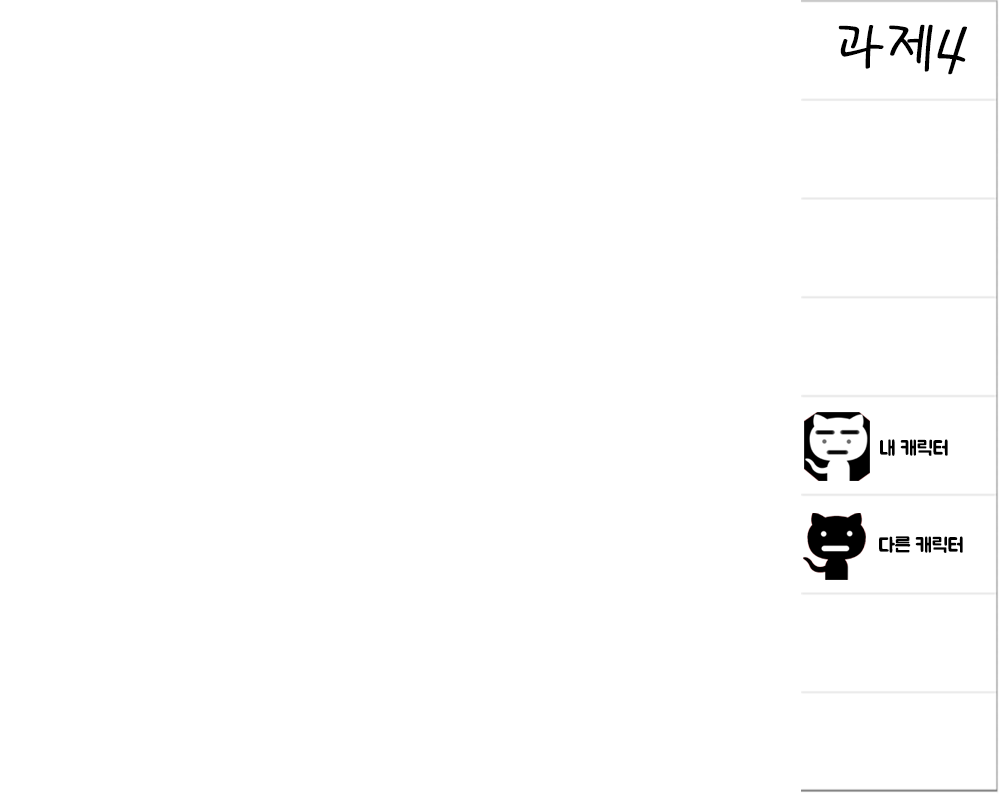
<style>
.page{position:relative;width:1000px;height:800px;background:#ffffff}
.page>*{position:absolute;margin:0}
.t1{font:60px "PyunjiR-HM";color:#000000}
.t2{font:20px "BMJUA";color:#000000}
</style>
<div class="page">
<p class="t1" style="left:838px;top:24px;width:129px;height:51px">과제4</p>
<p class="t2" style="left:880px;top:439px;width:68px;height:17px">내 캐릭터</p>
<p class="t2" style="left:879px;top:536px;width:84px;height:17px">다른 캐릭터</p>
</div>
